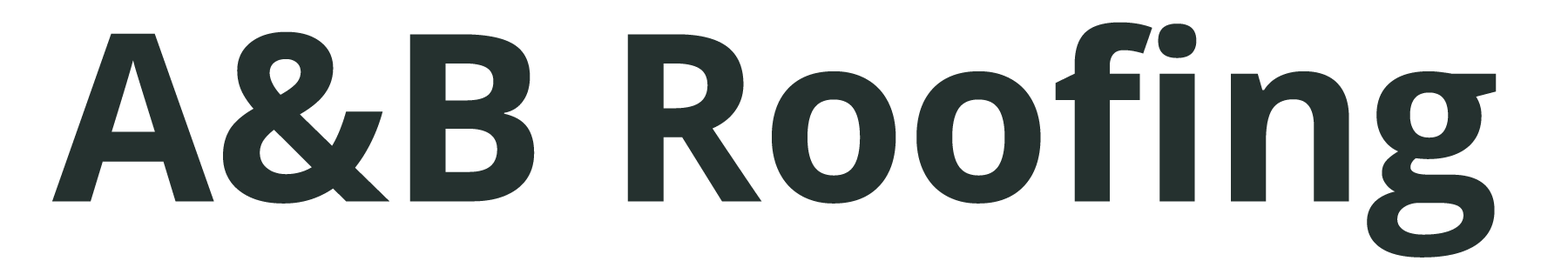
<style>
.page{position:relative;width:1568px;height:261px;background:#ffffff}
.page>*{position:absolute;margin:0}
.t1{font:233.8px "OpenSans-Bold";color:#25312f}
</style>
<div class="page">
<p class="t1" style="left:52px;top:22px;width:1445px;height:236px">A&amp;B Roofing</p>
</div>
